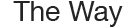
<style>
.page{position:relative;width:140px;height:28px;background:#ffffff}
.page>*{position:absolute;margin:0}
.t1{font:28.3px "HelveticaNeue";color:#242424}
</style>
<div class="page">
<p class="t1" style="left:13px;top:1px;width:110px;height:26px">The Way</p>
</div>
